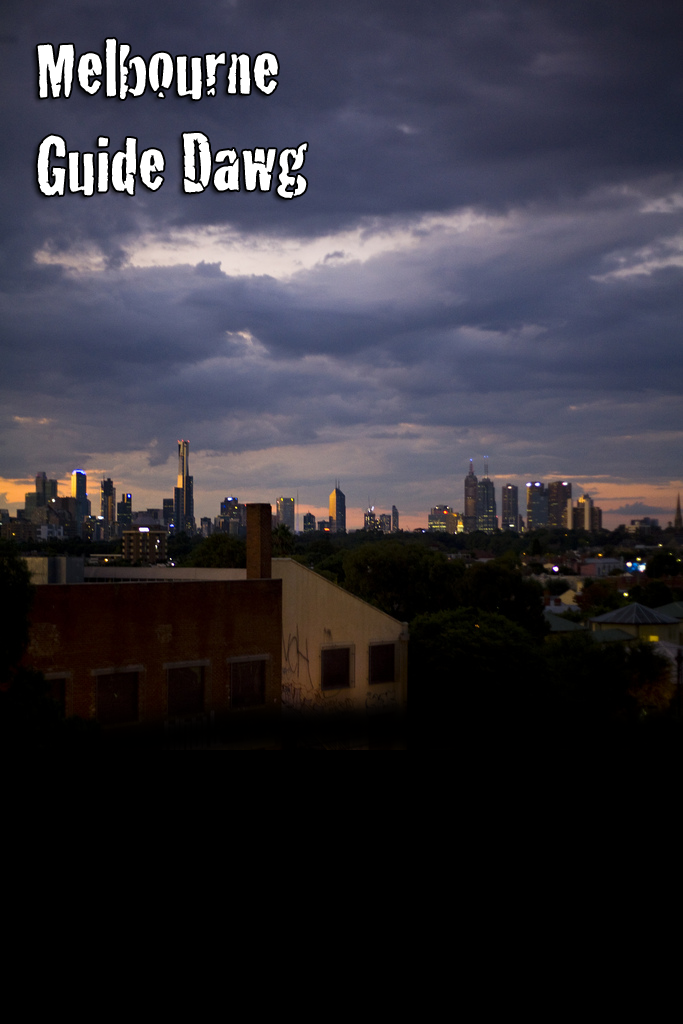
<style>
.page{position:relative;width:683px;height:1024px;background:#000000}
.page>*{position:absolute;margin:0}
.t1{font:80px "Cracked";color:#ffffff}
</style>
<div class="page">
<p class="t1" style="left:37px;top:38px;width:270px;height:160px">Melbourne<br>Guide Dawg</p>
</div>
